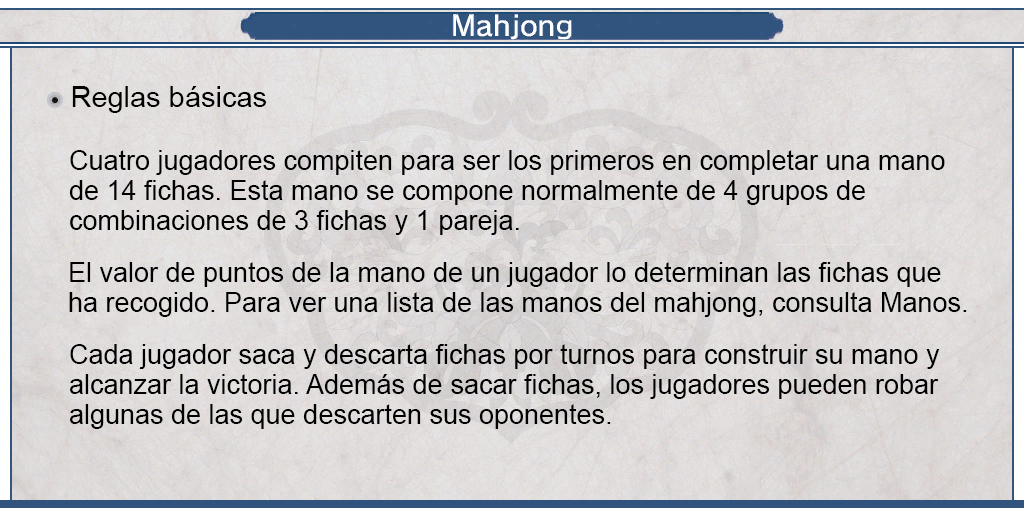
<style>
.page{position:relative;width:1024px;height:512px}
.page>*{position:absolute;margin:0}
.t1{font:29px "ArialMT";color:#000000}
.t2{font:27px/30px "ArialMT";color:#000000}
</style>
<div class="page">
<p class="t1" style="left:72px;top:86px;width:194px;height:27px">Reglas básicas</p>
<p class="t2" style="left:69px;top:150px;width:876px;height:85px;text-align:justify">Cuatro jugadores compiten para ser los primeros en completar una mano <br>de 14 fichas. Esta mano se compone normalmente de 4 grupos de <br>combinaciones de 3 fichas y 1 pareja.</p>
<p class="t2" style="left:69px;top:262px;width:898px;height:55px;text-align:justify">El valor de puntos de la mano de un jugador lo determinan las fichas que <br>ha recogido. Para ver una lista de las manos del mahjong, consulta Manos.</p>
<p class="t2" style="left:70px;top:344px;width:870px;height:85px;text-align:justify">Cada jugador saca y descarta fichas por turnos para construir su mano y<br>alcanzar la victoria. Además de sacar fichas, los jugadores pueden robar<br>algunas de las que descarten sus oponentes.</p>
</div>
